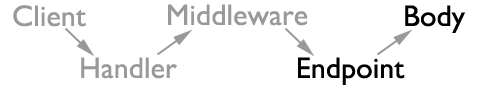
<style>
.page{position:relative;width:500px;height:100px;background:#ffffff}
.page>*{position:absolute;margin:0}
.t1{font:30px "GillSans";color:#999999}
.t2{font:30px "GillSans";color:#000000}
</style>
<div class="page">
<p class="t1" style="left:13px;top:5px;width:73px;height:22px">Client</p>
<p class="t1" style="left:168px;top:4px;width:140px;height:22px">Middleware</p>
<p class="t2" style="left:405px;top:5px;width:60px;height:28px">Body</p>
<p class="t1" style="left:81px;top:57px;width:96px;height:22px">Handler</p>
<p class="t2" style="left:298px;top:57px;width:107px;height:28px">Endpoint</p>
</div>
